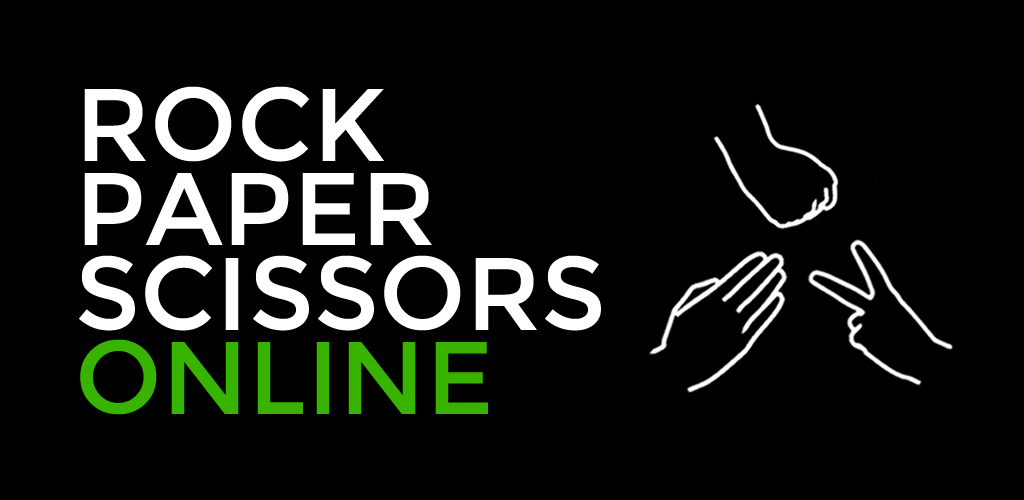
<style>
.page{position:relative;width:1024px;height:500px;background:#000000}
.page>*{position:absolute;margin:0}
.t1{font:103.4px/84.3px "Montserrat-Regular";color:#ffffff}
.t2{font:103.4px/84.3px "Montserrat-Regular";color:#37b300}
</style>
<div class="page">
<p class="t1" style="left:79px;top:86px;width:522px;height:329px">ROCK<br>PAPER<br>SCISSORS<br><span class="t2">ONLINE</span></p>
</div>
